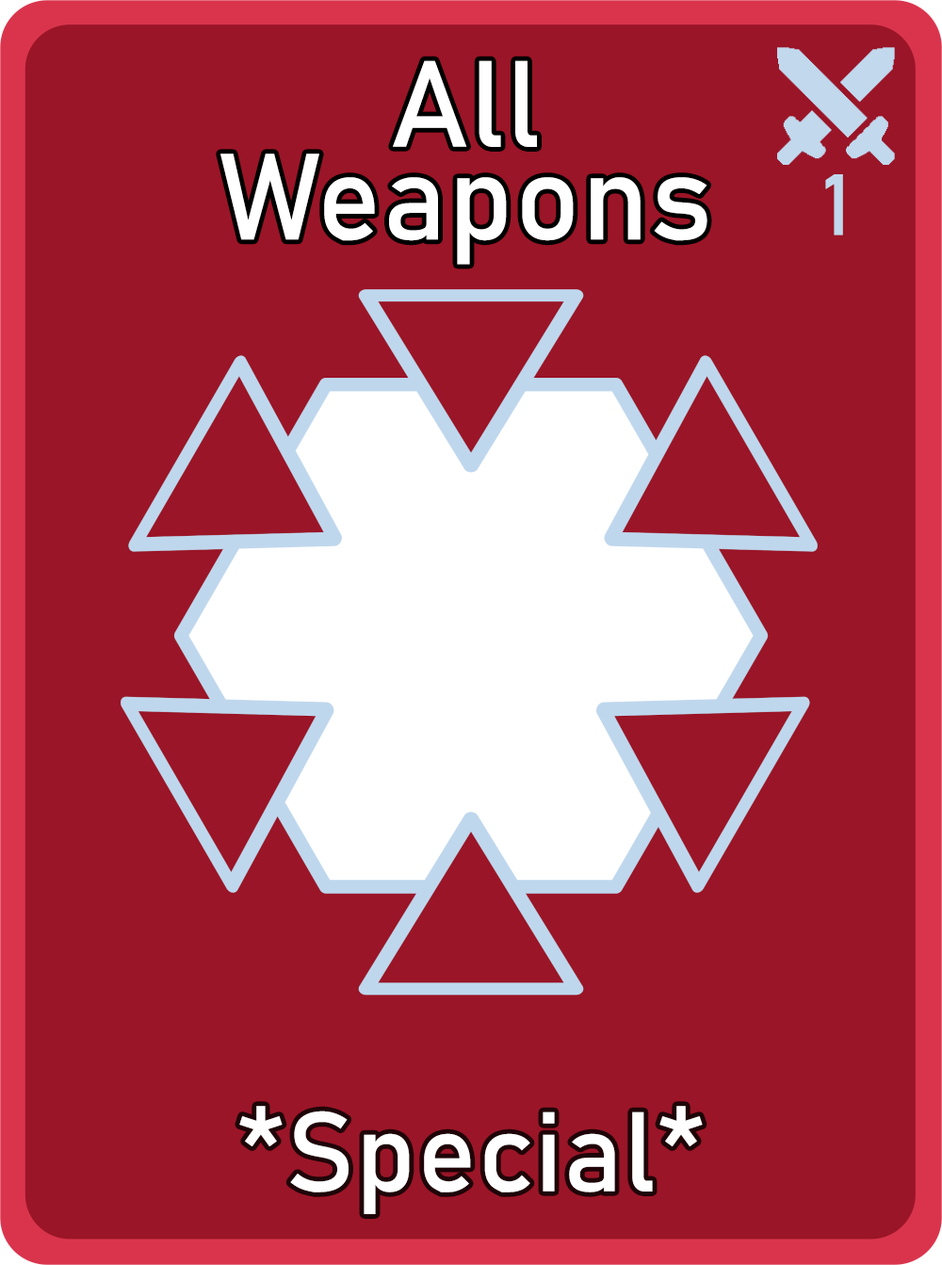
<style>
.page{position:relative;width:942px;height:1265px;background:#9a1527}
.page>*{position:absolute;margin:0}
.t1{font:120.6px/92.7px "Bahnschrift";letter-spacing:0.01em;color:#ffffff}
.t2{font:85px "Bahnschrift";letter-spacing:0.01em;color:#c1d8ed}
.t3{font:111.3px "Bahnschrift";letter-spacing:0.01em;color:#ffffff}
</style>
<div class="page">
<p class="t1" style="left:220px;top:60px;width:488px;height:205px;text-align:center">All<br>Weapons</p>
<p class="t2" style="left:825px;top:174px;width:18px;height:62px">1</p>
<p class="t3" style="left:239px;top:1106px;width:464px;height:109px">*Special*</p>
</div>
